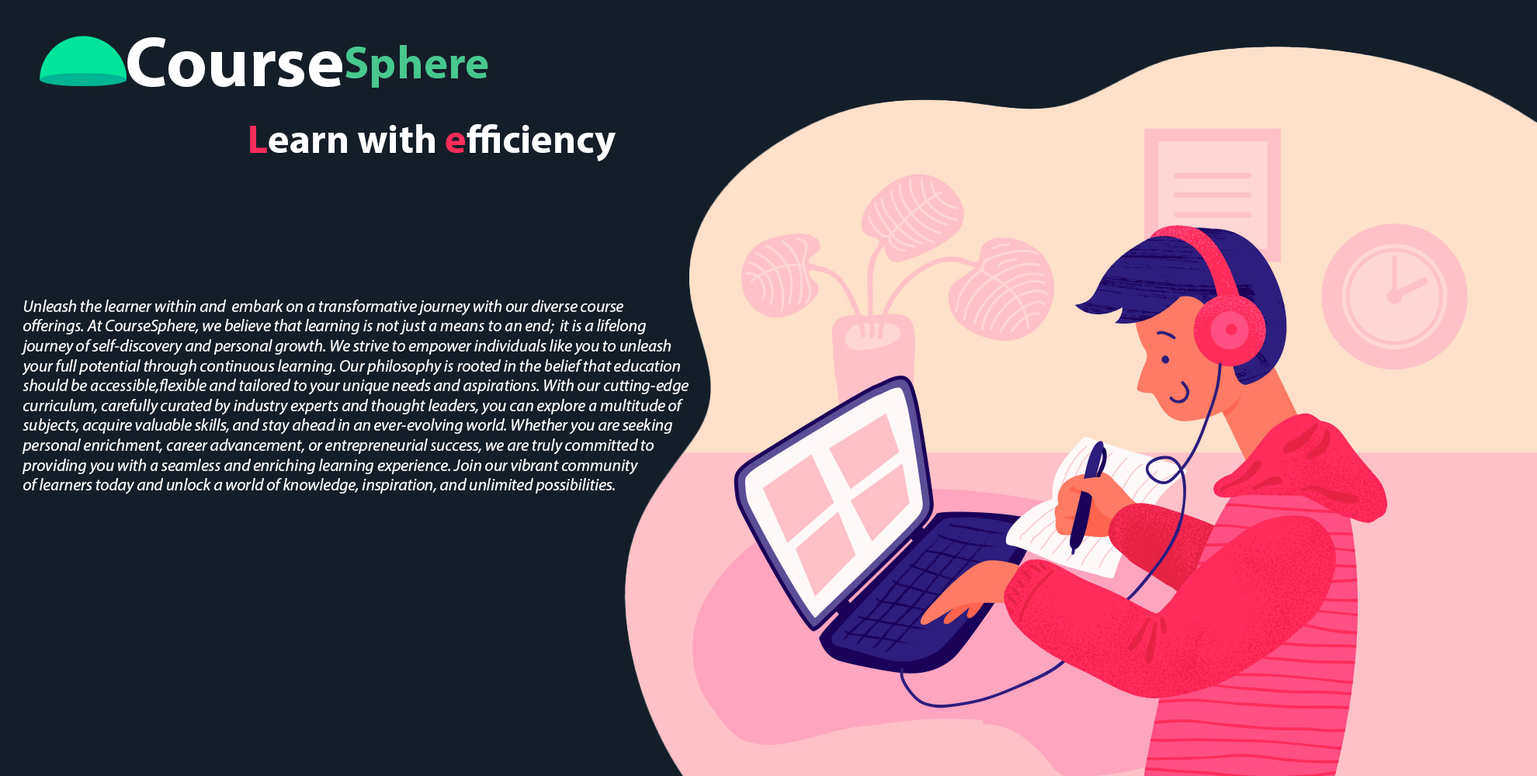
<style>
.page{position:relative;width:1537px;height:776px;background:#141e28}
.page>*{position:absolute;margin:0}
.t1{font:71.2px "MyriadPro-Bold";color:#ffffff}
.t2{font:46px "MyriadPro-Bold";color:#48c78e}
.t3{font:40.1px "MyriadPro-Bold";color:#ffffff}
.t4{font:40.1px "MyriadPro-Bold";color:#fe2c5c}
.t5{font:16.6px "MyriadPro-It";color:#ffffff}
</style>
<div class="page">
<p class="t1" style="left:127px;top:37px;width:215px;height:50px">Course</p>
<p class="t2" style="left:345px;top:45px;width:143px;height:43px">Sphere</p>
<p class="t3" style="left:250px;top:124px;width:365px;height:37px"><span class="t4">L</span>earn with <span class="t4">e</span>fficiency</p>
<p class="t5" style="left:21px;top:300px;width:667px;height:194px">Unleash the learner within and  embark on a transformative journey with our diverse course <br>offerings. At CourseSphere, we believe that learning is not just a means to an end;  it is a lifelong <br>journey of self-discovery and personal growth. We strive to empower individuals like you to unleash <br>your full potential through continuous learning. Our philosophy is rooted in the belief that education <br>should be accessible,flexible and tailored to your unique needs and aspirations. With our cutting-edge <br>curriculum, carefully curated by industry experts and thought leaders, you can explore a multitude of <br>subjects, acquire valuable skills, and stay ahead in an ever-evolving world. Whether you are seeking <br>personal enrichment, career advancement, or entrepreneurial success, we are truly committed to <br>providing you with a seamless and enriching learning experience. Join our vibrant community <br>of learners today and unlock a world of knowledge, inspiration, and unlimited possibilities.</p>
</div>
